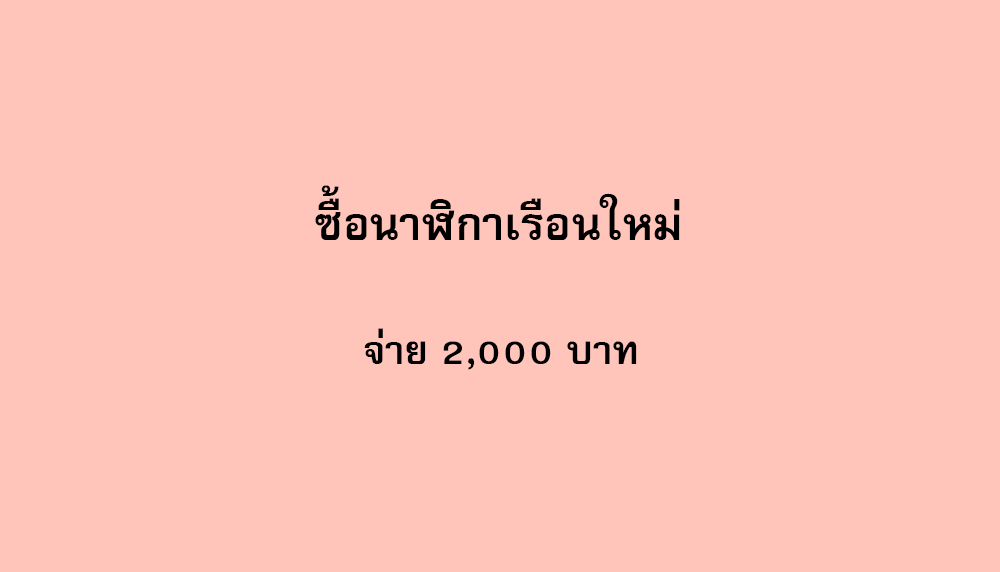
<style>
.page{position:relative;width:1000px;height:572px;background:#ffc4ba}
.page>*{position:absolute;margin:0}
.t1{font:64px "FreesiaUPCBold";color:#000000}
.t2{font:56px "FreesiaUPCBold";color:#000000}
</style>
<div class="page">
<p class="t1" style="left:315px;top:185px;width:365px;height:55px">ซื้อนาฬิกาเรือนใหม่</p>
<p class="t2" style="left:364px;top:328px;width:273px;height:42px">จ่าย 2,000 บาท</p>
</div>
